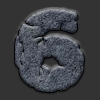
<style>
.page{position:relative;width:100px;height:100px;background:#333333}
.page>*{position:absolute;margin:0}
.t1{font:100px "JFRockSolid"}
</style>
<div class="page">
<p class="t1" style="left:15px;top:9px;width:69px;height:83px">6</p>
</div>
